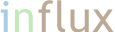
<style>
.page{position:relative;width:115px;height:32px;background:#ffffff}
.page>*{position:absolute;margin:0}
.t1{font:43px "TrebuchetMS";letter-spacing:0.025em;color:#bcaa96}
.t2{font:43px "TrebuchetMS";letter-spacing:0.025em;color:#aacde6}
.t3{font:43px "TrebuchetMS";letter-spacing:0.025em;color:#c3e8ba}
</style>
<div class="page">
<p class="t1" style="left:0px;top:0px;width:114px;height:33px"><span class="t2">i</span><span class="t3">n</span>flux</p>
</div>
